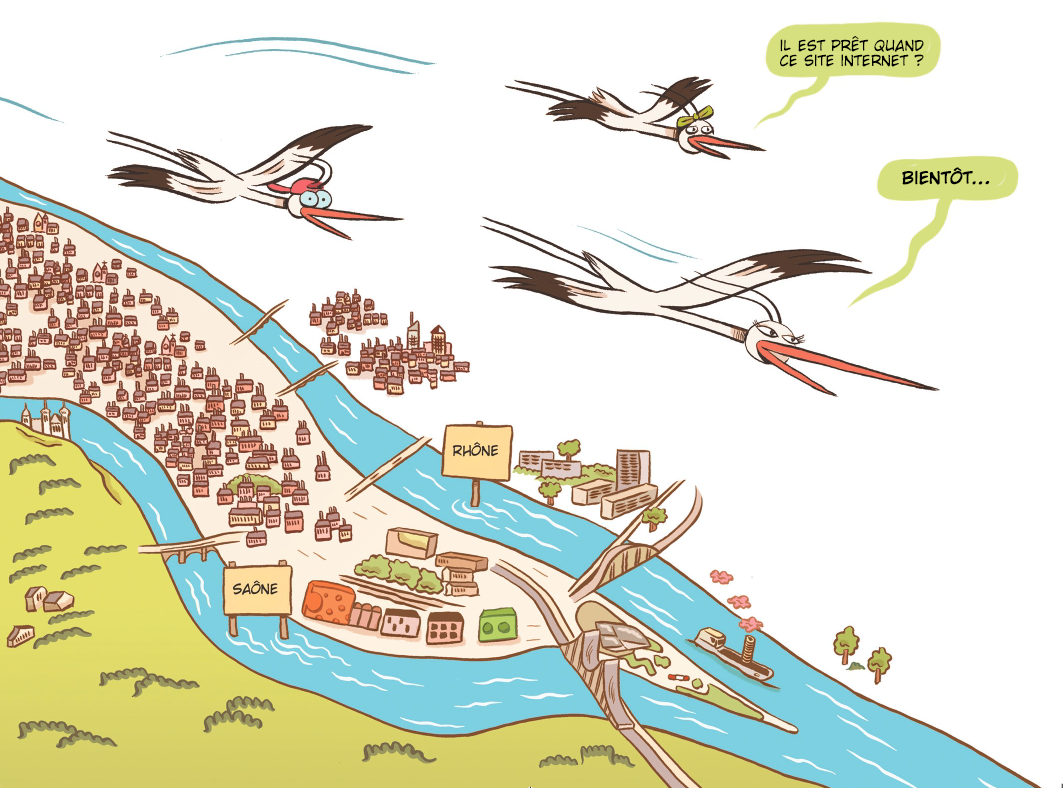
<style>
.page{position:relative;width:1063px;height:788px;background:#ffffff}
.page>*{position:absolute;margin:0}
.t1{font:14.6px/14.6px "CCWildWordsIntMod-Regular";color:#000000}
.t2{font:16.7px "CCWildWordsIntMod-Regular";color:#000000;font-weight:bold}
</style>
<div class="page">
<p class="t1" style="left:780px;top:36px;width:144px;height:31px">il est prêt quand <br>ce site internet ?</p>
<p class="t2" style="left:902px;top:167px;width:88px;height:18px">bientôt…</p>
</div>
